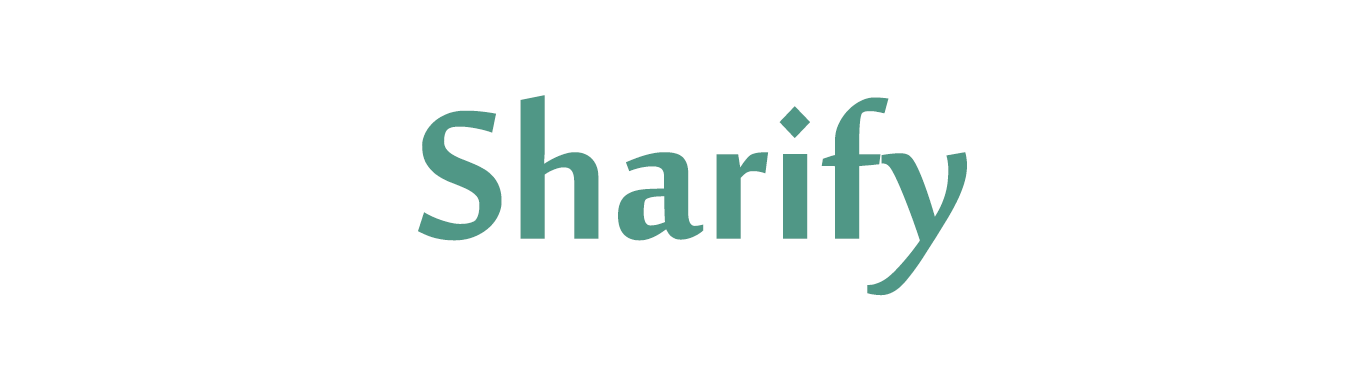
<style>
.page{position:relative;width:1366px;height:384px;background:#ffffff}
.page>*{position:absolute;margin:0}
.t1{font:280.5px "MoolBoran";color:#509786}
</style>
<div class="page">
<p class="t1" style="left:418px;top:95px;width:549px;height:201px">Sharify</p>
</div>
